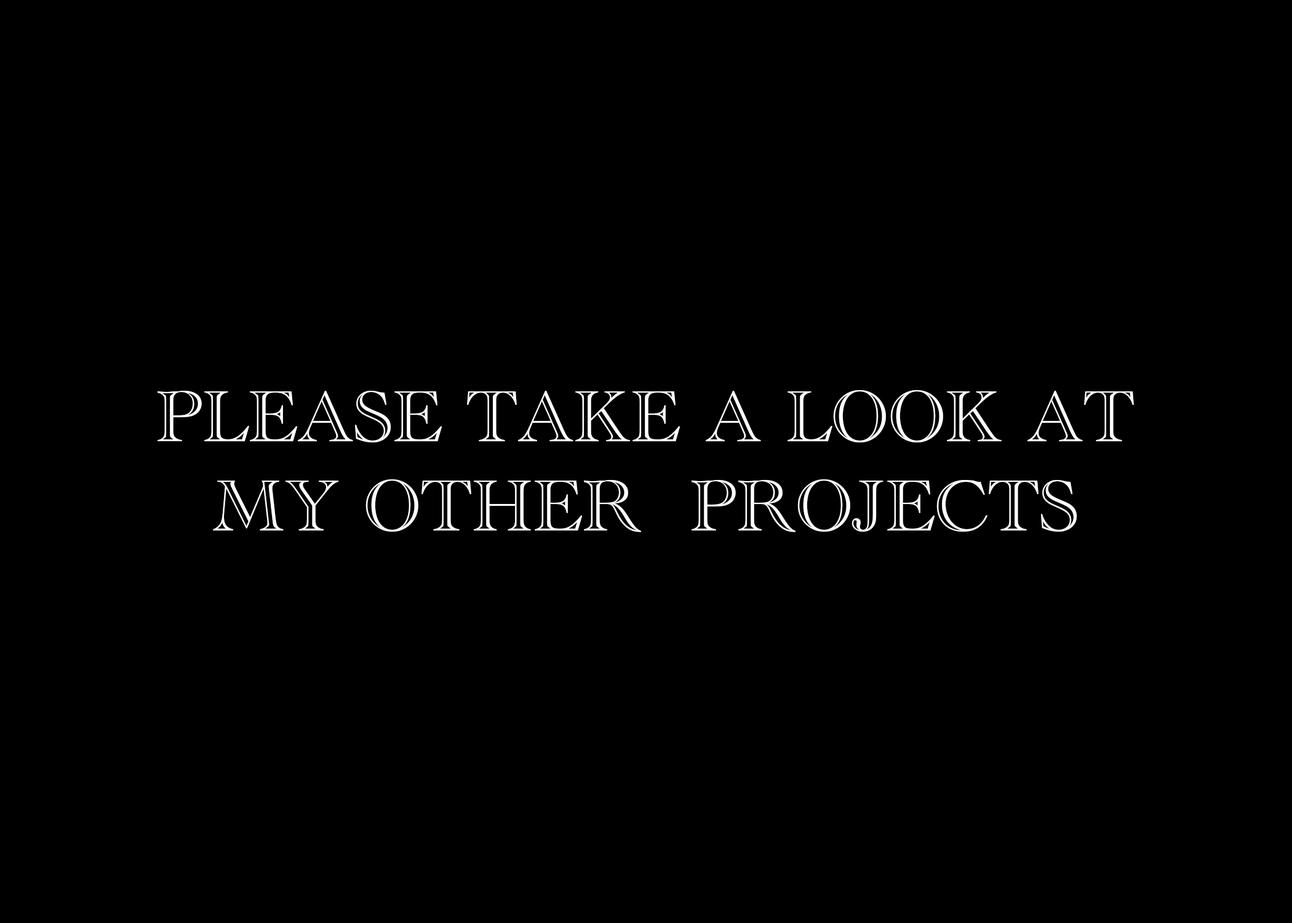
<style>
.page{position:relative;width:1292px;height:923px;background:#000000}
.page>*{position:absolute;margin:0}
.t1{font:74.6px "AcademyEngravedLetPlain";color:#ffffff}
</style>
<div class="page">
<p class="t1" style="left:158px;top:390px;width:976px;height:142px;text-align:center">PLEASE TAKE A LOOK AT <br>MY OTHER  PROJECTS</p>
</div>
